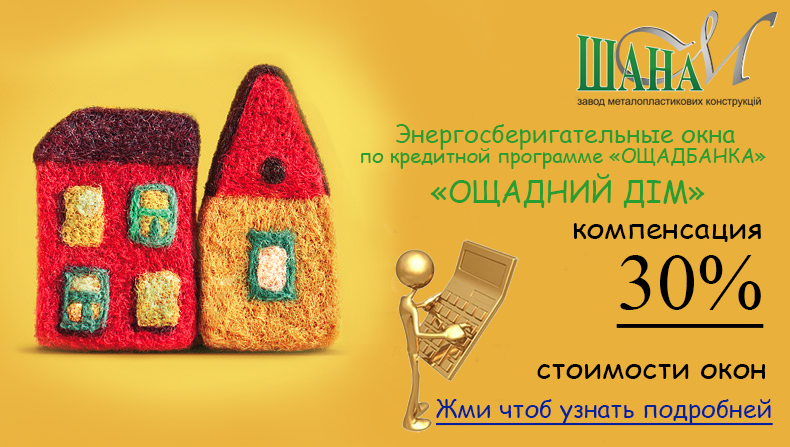
<style>
.page{position:relative;width:790px;height:447px;background:#e9b03c}
.page>*{position:absolute;margin:0}
.t1{font:20px/20px "ComicSansMS";color:#279d32}
.t2{font:20px "ComicSansMS";color:#279d32}
.t3{font:25px "ComicSansMS";color:#279d32}
.t4{font:30px/40px "ComicSansMS";color:#279d32}
.t5{font:30px/70px "ComicSansMS";color:#000000}
.t6{font:80px/70px "TimesNewRomanPSMT";color:#000000;text-decoration:underline}
.t7{font:25px "ComicSansMS";color:#05219b;text-decoration:underline}
</style>
<div class="page">
<p class="t1" style="left:361px;top:124px;width:405px;height:84px"><span class="t2">      </span><span class="t3">Энергосберигательные окна<br></span>по кредитной программе «ОЩАДБАНКА»<br><span class="t4">        «ОЩАДНИЙ ДІМ»</span></p>
<p class="t5" style="left:537px;top:223px;width:228px;height:156px">компенсация<br>         <span class="t6">30% <br></span>стоимости окон</p>
<p class="t7" style="left:436px;top:399px;width:337px;height:27px">Жми чтоб узнать подробней</p>
</div>
